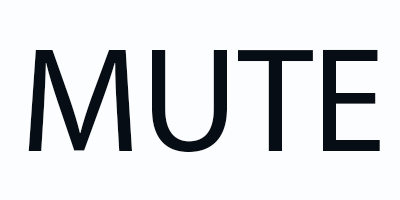
<style>
.page{position:relative;width:400px;height:200px;background:#fbfdff}
.page>*{position:absolute;margin:0}
.t1{font:150px "MyriadPro-Regular";color:#060d15}
</style>
<div class="page">
<p class="t1" style="left:28px;top:49px;width:352px;height:104px">MUTE</p>
</div>
